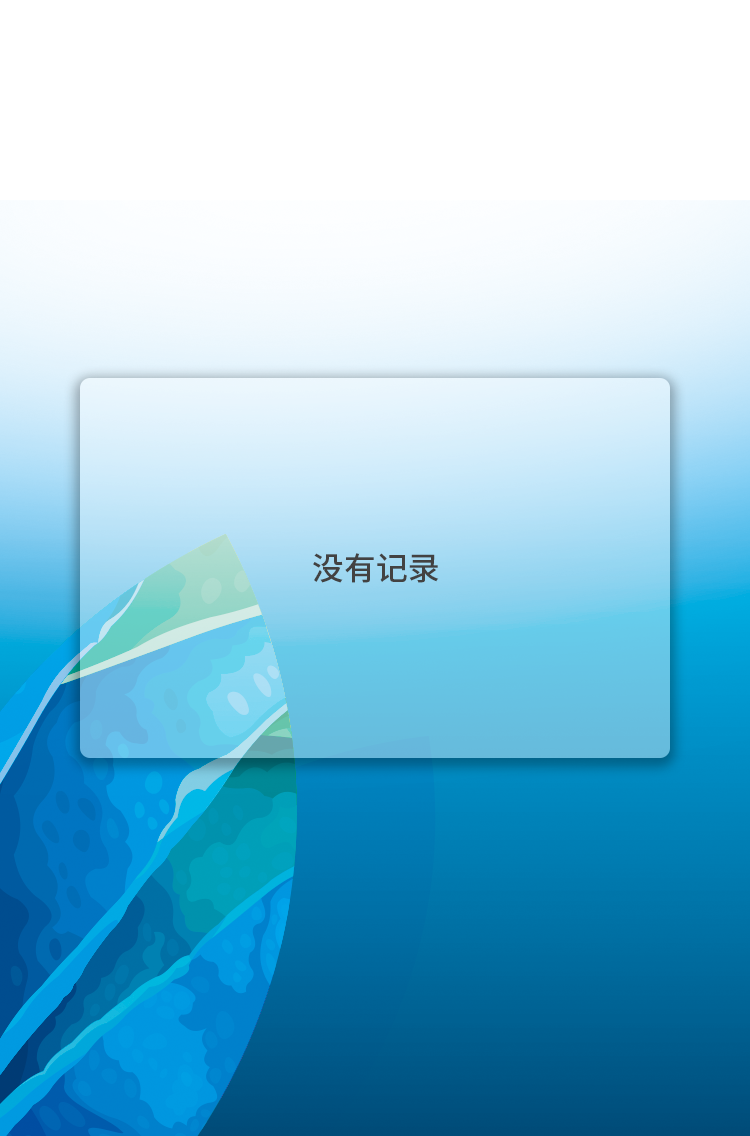
<style>
.page{position:relative;width:750px;height:1136px}
.page>*{position:absolute;margin:0}
.t1{font:32px "SourceHanSansCN-Medium";color:#434242}
</style>
<div class="page">
<p class="t1" style="left:313px;top:553px;width:126px;height:30px">没有记录</p>
</div>
